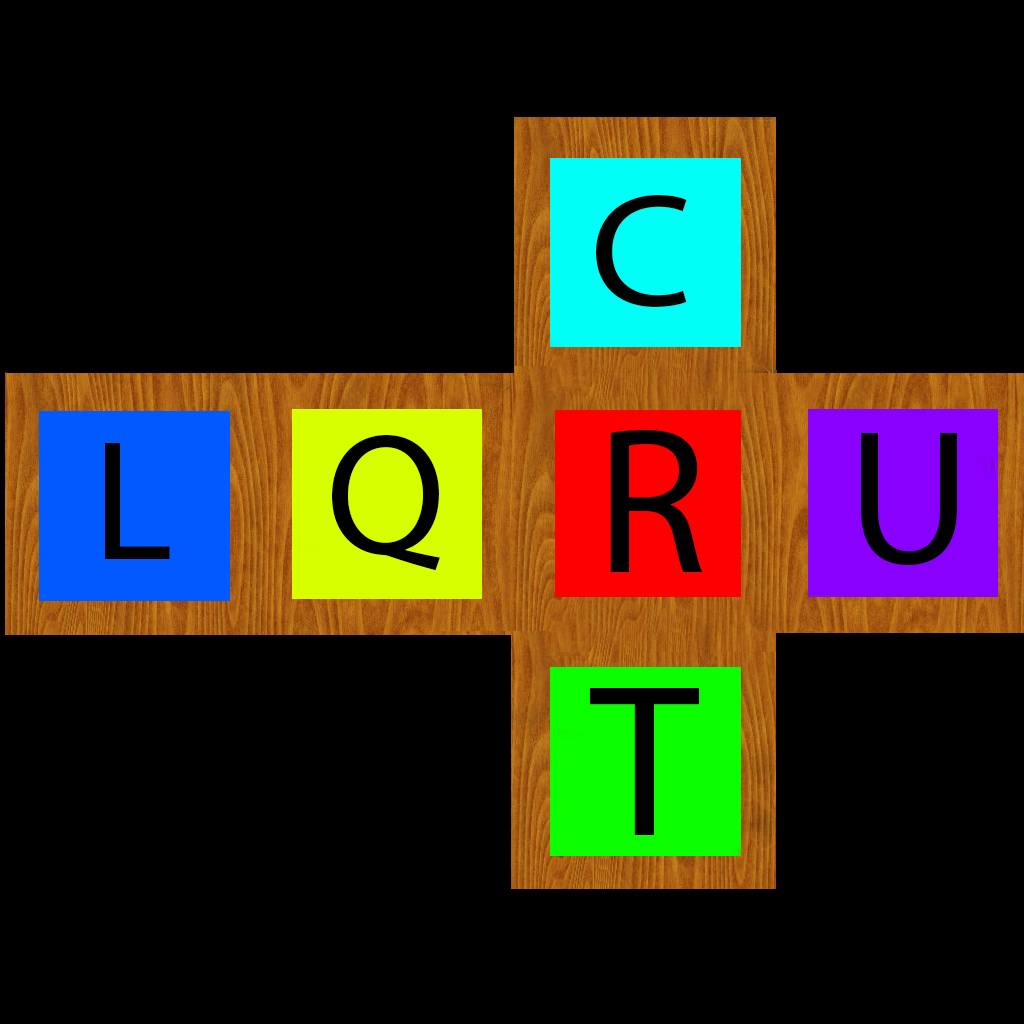
<style>
.page{position:relative;width:1024px;height:1024px;background:#000000}
.page>*{position:absolute;margin:0}
.t1{font:162px "MyriadPro-Regular";color:#000000;scale:1.09 1}
.t2{font:172.7px "MyriadPro-Regular";color:#000000}
.t3{font:208.8px "MyriadPro-Regular";color:#000000}
.t4{font:193.4px "MyriadPro-Regular";color:#000000}
.t5{font:172px "MyriadPro-Regular";color:#000000}
.t6{font:218.8px "MyriadPro-Regular";color:#000000}
</style>
<div class="page">
<p class="t1" style="left:596px;top:195px;width:91px;height:112px">C</p>
<p class="t2" style="left:332px;top:435px;width:108px;height:136px">Q</p>
<p class="t3" style="left:610px;top:430px;width:93px;height:142px">R</p>
<p class="t4" style="left:861px;top:433px;width:96px;height:132px">U</p>
<p class="t5" style="left:105px;top:443px;width:65px;height:116px">L</p>
<p class="t6" style="left:589px;top:688px;width:111px;height:147px">T</p>
</div>
